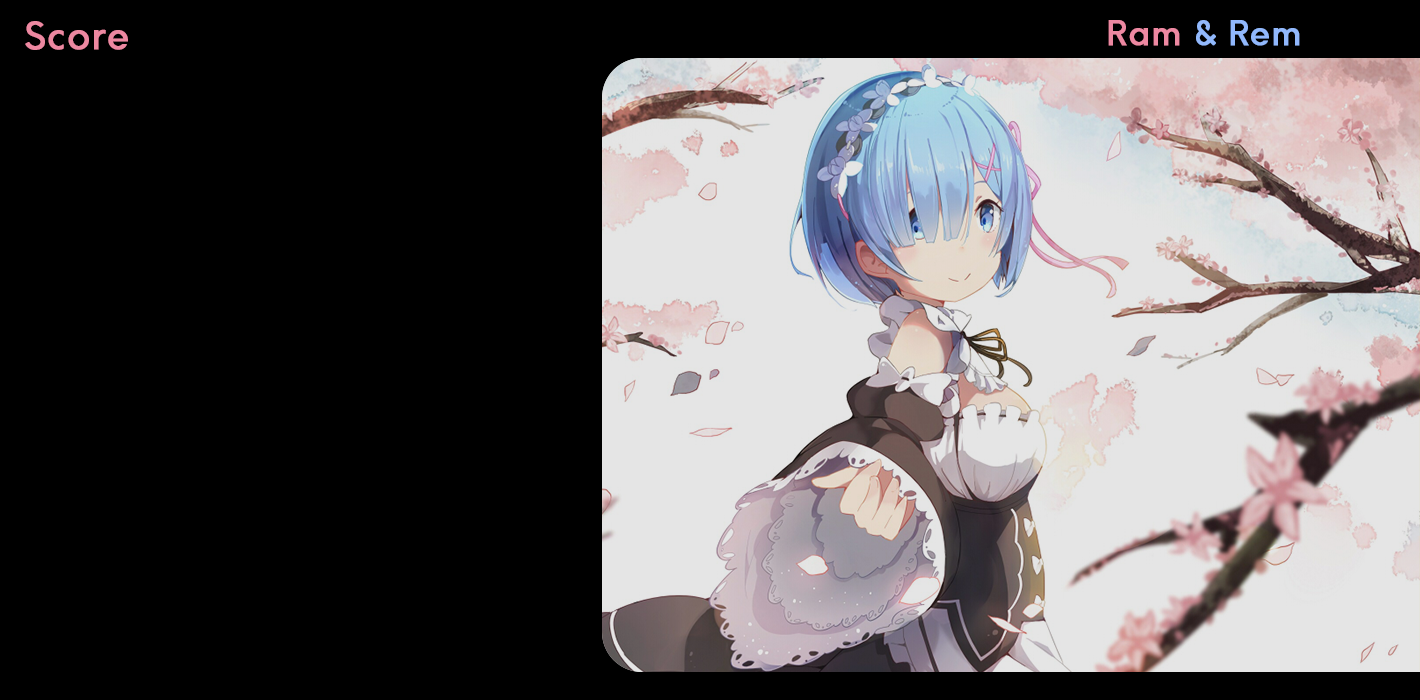
<style>
.page{position:relative;width:1420px;height:700px;background:#000000}
.page>*{position:absolute;margin:0}
.t1{font:36.8px "HKExplorerSharp-Regular";letter-spacing:0.02em;color:#ed88a1;font-weight:bold}
.t2{font:33.3px "HKExplorerSharp-Regular";letter-spacing:0.02em;color:#91b8fc;font-weight:bold}
.t3{font:33.3px "HKExplorerSharp-Regular";letter-spacing:0.02em;color:#ed88a1;font-weight:bold}
</style>
<div class="page">
<p class="t1" style="left:25px;top:21px;width:103px;height:29px">Score</p>
<p class="t2" style="left:1108px;top:20px;width:192px;height:26px"><span class="t3">Ram</span> &amp; Rem</p>
</div>
